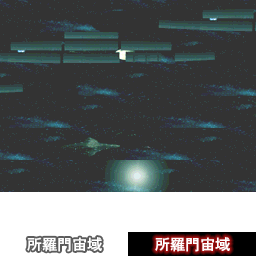
<style>
.page{position:relative;width:256px;height:256px;background:#333333}
.page>*{position:absolute;margin:0}
.t1{font:15px "HeiseiKakuGoStd-W5";letter-spacing:0.04em;color:#ffffff}
</style>
<div class="page">
<p class="t1" style="left:27px;top:237px;width:75px;height:15px">所羅門宙域</p>
<p class="t1" style="left:155px;top:237px;width:75px;height:15px">所羅門宙域</p>
</div>
